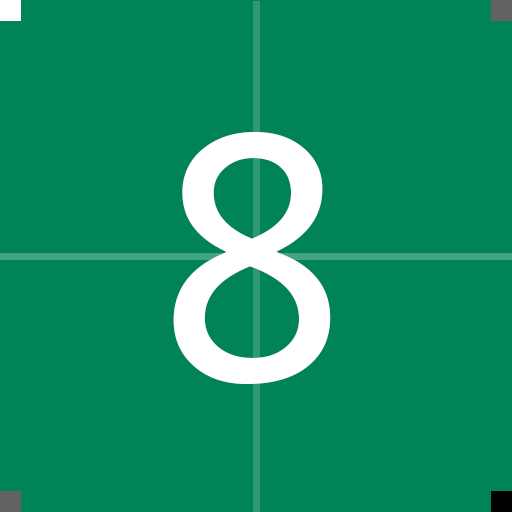
<style>
.page{position:relative;width:512px;height:512px;background:#008355}
.page>*{position:absolute;margin:0}
.t1{font:323.1px "MicrosoftYaHei";color:#ffffff}
</style>
<div class="page">
<p class="t1" style="left:173px;top:132px;width:158px;height:252px">8</p>
</div>
